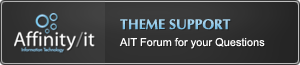
<style>
.page{position:relative;width:300px;height:65px}
.page>*{position:absolute;margin:0}
.t1{font:14px "Ottawa-Bold";color:#90c8e8}
.t2{font:11px "ArialMT";color:#ffffff}
</style>
<div class="page">
<p class="t1" style="left:120px;top:19px;width:111px;height:11px">THEME SUPPORT</p>
<p class="t2" style="left:119px;top:37px;width:146px;height:12px">AIT Forum for your Questions</p>
</div>
